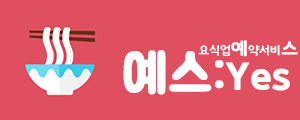
<style>
.page{position:relative;width:300px;height:120px;background:#e04f5f}
.page>*{position:absolute;margin:0}
.t1{font:12px "GodoB";color:#ffffff}
.t2{font:18px "GodoB";color:#ffffff;font-weight:bold}
.t3{font:55px "BMJUA";color:#ffffff;font-weight:bold}
.t4{font:36px "GodoB";color:#ffffff;font-weight:bold}
</style>
<div class="page">
<p class="t1" style="left:198px;top:40px;width:100px;height:17px">요식업<span class="t2">예</span>약서비<span class="t2">스</span></p>
<p class="t3" style="left:123px;top:50px;width:101px;height:45px">예스:</p>
<p class="t4" style="left:225px;top:62px;width:65px;height:29px">Yes</p>
</div>
